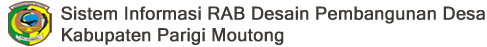
<style>
.page{position:relative;width:487px;height:47px;background:#ffffff}
.page>*{position:absolute;margin:0}
.t1{font:18px "MicrosoftSansSerif";color:#403a3a;font-weight:bold}
</style>
<div class="page">
<p class="t1" style="left:61px;top:6px;width:424px;height:39px">Sistem Informasi RAB Desain Pembangunan Desa <br>Kabupaten Parigi Moutong</p>
</div>
